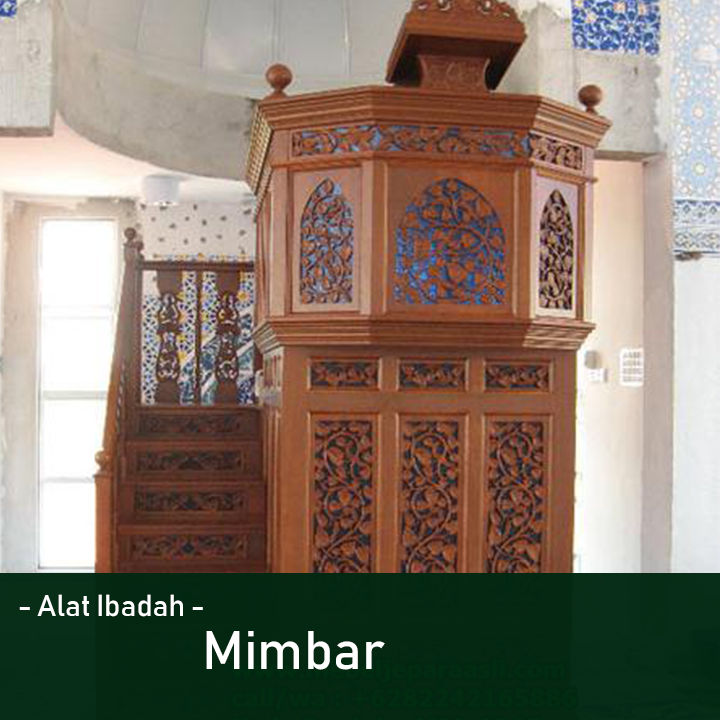
<style>
.page{position:relative;width:720px;height:720px}
.page>*{position:absolute;margin:0}
.t1{font:30px "Bahnschrift";color:#ffffff}
.t2{font:53.6px "Bahnschrift";color:#ffffff}
</style>
<div class="page">
<p class="t1" style="left:19px;top:594px;width:184px;height:23px">- Alat Ibadah -</p>
<p class="t2" style="left:206px;top:631px;width:179px;height:39px">Mimbar</p>
</div>
